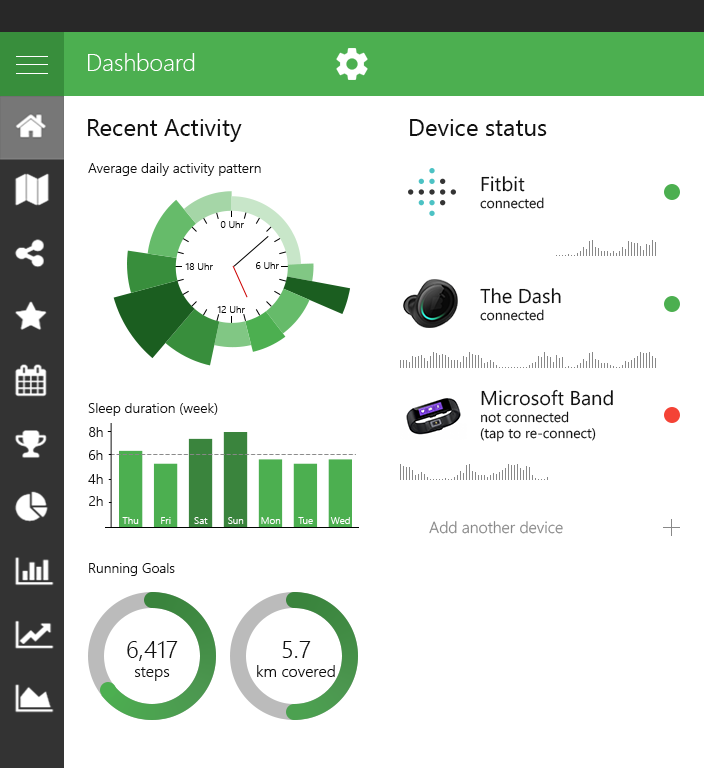
<style>
.page{position:relative;width:704px;height:768px;background:#ffffff}
.page>*{position:absolute;margin:0}
.t1{font:24px "SegoeUI-Light";color:#ffffff}
.t2{font:24px "SegoeUI";color:#111111}
.t3{font:14px "SegoeUI-Semilight";color:#111111}
.t4{font:14px "SegoeUI";color:#111111}
.t5{font:19.9px "SegoeUI";color:#111111}
.t6{font:10px "SegoeUI-Semilight";color:#000000}
.t7{font:10px "SegoeUI-Semilight";color:#ffffff}
.t8{font:16px "SegoeUI-Semilight";color:#888888}
.t9{font:24px "SegoeUI-Semilight";color:#111111}
.t10{font:16px "SegoeUI-Semilight";color:#111111}
</style>
<div class="page">
<p class="t1" style="left:88px;top:53px;width:107px;height:18px">Dashboard</p>
<p class="t2" style="left:88px;top:119px;width:154px;height:23px">Recent Activity</p>
<p class="t2" style="left:410px;top:119px;width:137px;height:17px">Device status</p>
<p class="t3" style="left:88px;top:163px;width:173px;height:13px">Average daily activity pattern</p>
<p class="t4" style="left:480px;top:176px;width:64px;height:33px"><span class="t5">Fitbit<br></span>connected</p>
<p class="t6" style="left:220px;top:221px;width:24px;height:7px">0 Uhr</p>
<p class="t6" style="left:185px;top:263px;width:28px;height:7px">18 Uhr</p>
<p class="t6" style="left:256px;top:262px;width:23px;height:7px">6 Uhr</p>
<p class="t4" style="left:480px;top:288px;width:81px;height:33px"><span class="t5">The Dash<br></span>connected</p>
<p class="t6" style="left:217px;top:306px;width:28px;height:7px">12 Uhr</p>
<p class="t4" style="left:480px;top:389px;width:133px;height:53px"><span class="t5">Microsoft Band<br></span>not connected <br>(tap to re-connect)</p>
<p class="t3" style="left:88px;top:403px;width:130px;height:13px">Sleep duration (week)</p>
<p class="t3" style="left:89px;top:427px;width:14px;height:10px">8h</p>
<p class="t3" style="left:89px;top:450px;width:14px;height:10px">6h</p>
<p class="t3" style="left:88px;top:474px;width:15px;height:10px">4h</p>
<p class="t3" style="left:89px;top:496px;width:14px;height:10px">2h</p>
<p class="t7" style="left:122px;top:517px;width:17px;height:7px">Thu</p>
<p class="t7" style="left:161px;top:517px;width:10px;height:7px">Fri</p>
<p class="t7" style="left:194px;top:517px;width:14px;height:7px">Sat</p>
<p class="t7" style="left:228px;top:517px;width:16px;height:7px">Sun</p>
<p class="t7" style="left:261px;top:517px;width:20px;height:7px">Mon</p>
<p class="t7" style="left:298px;top:517px;width:15px;height:7px">Tue</p>
<p class="t7" style="left:330px;top:517px;width:20px;height:7px">Wed</p>
<p class="t8" style="left:429px;top:521px;width:134px;height:13px">Add another device</p>
<p class="t3" style="left:89px;top:563px;width:86px;height:13px">Running Goals</p>
<p class="t9" style="left:127px;top:641px;width:51px;height:40px;text-align:center">6,417<br><span class="t10">steps</span></p>
<p class="t10" style="left:257px;top:641px;width:78px;height:36px;text-align:center"><span class="t9">5.7<br></span>km covered</p>
</div>
